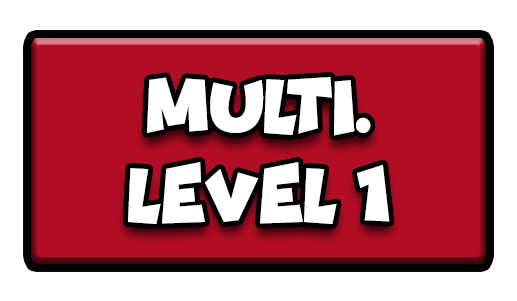
<style>
.page{position:relative;width:517px;height:301px;background:#ffffff}
.page>*{position:absolute;margin:0}
.t1{font:77.7px "Funhouse";color:#ffffff;scale:0.95 1}
</style>
<div class="page">
<p class="t1" style="left:147px;top:77px;width:224px;height:59px">MULTI.</p>
<p class="t1" style="left:128px;top:162px;width:262px;height:62px">LEVEL 1</p>
</div>
